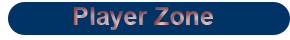
<style>
.page{position:relative;width:290px;height:40px;background:#003366}
.page>*{position:absolute;margin:0}
.t1{font:25px "Arial-BoldMT"}
</style>
<div class="page">
<p class="t1" style="left:73px;top:7px;width:140px;height:23px">Player Zone</p>
</div>
